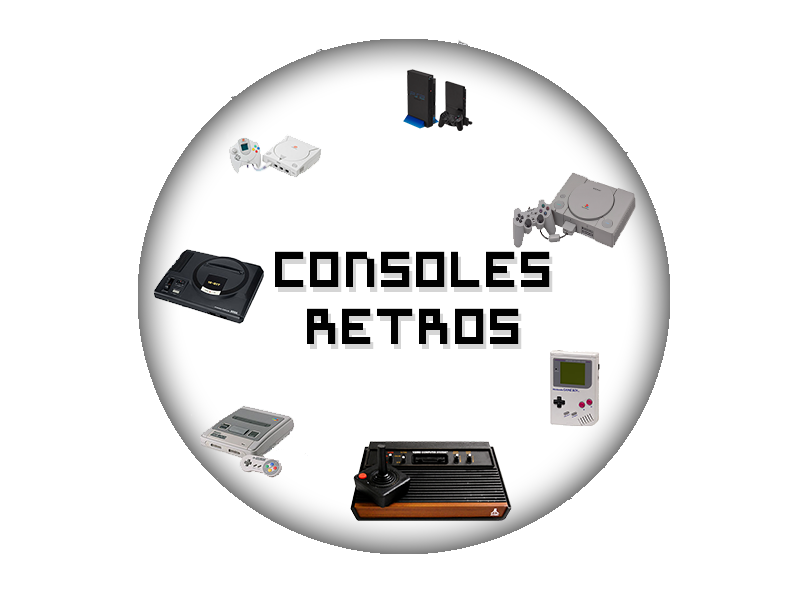
<style>
.page{position:relative;width:800px;height:600px;background:#ffffff}
.page>*{position:absolute;margin:0}
.t1{font:48px "Symtext";color:#000000}
</style>
<div class="page">
<p class="t1" style="left:275px;top:251px;width:275px;height:93px;text-align:center">Consoles Retros</p>
</div>
